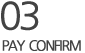
<style>
.page{position:relative;width:85px;height:53px;background:#ffffff}
.page>*{position:absolute;margin:0}
.t1{font:37.5px "NanumGothic";letter-spacing:-0.12em;color:#434343;font-weight:bold}
.t2{font:14px "NanumGothic";letter-spacing:-0.12em;color:#434343;font-weight:bold;scale:0.95 1}
</style>
<div class="page">
<p class="t1" style="left:1px;top:1px;width:38px;height:30px">03</p>
<p class="t2" style="left:2px;top:40px;width:79px;height:11px">PAY  CONFIRM</p>
</div>
